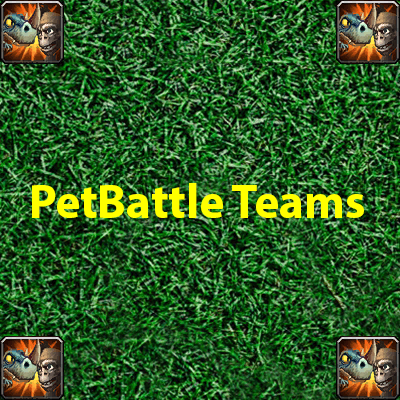
<style>
.page{position:relative;width:400px;height:400px}
.page>*{position:absolute;margin:0}
.t1{font:48px "MyriadPro-Bold";letter-spacing:-0.005em;color:#ffff00}
</style>
<div class="page">
<p class="t1" style="left:32px;top:183px;width:332px;height:35px">PetBattle Teams</p>
</div>
